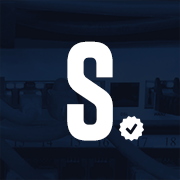
<style>
.page{position:relative;width:180px;height:180px}
.page>*{position:absolute;margin:0}
.t1{font:175.5px "Tungsten-Semibold";color:#ffffff;scale:0.92 1}
</style>
<div class="page">
<p class="t1" style="left:67px;top:41px;width:46px;height:100px">s</p>
</div>
